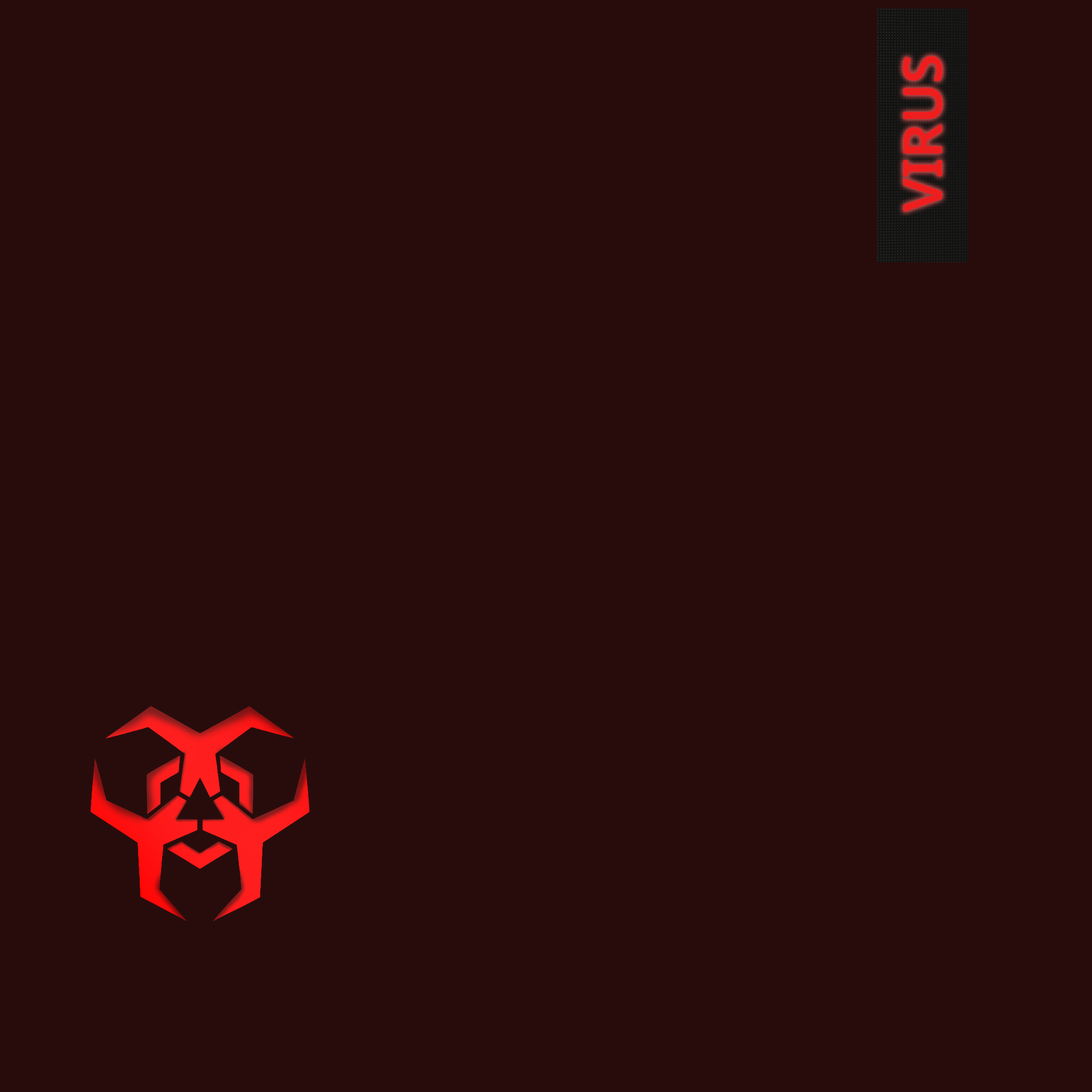
<style>
.page{position:relative;width:1092px;height:1092px;background:#280c0c}
.page>*{position:absolute;margin:0}
.t1{font:53.7px "NotoSans-SemiBold";color:#ef1e1e;text-transform:uppercase}
</style>
<div class="page">
<p class="t1" style="left:903px;top:56px;width:40px;height:156px;rotate:-90deg">VIRUS</p>
</div>
